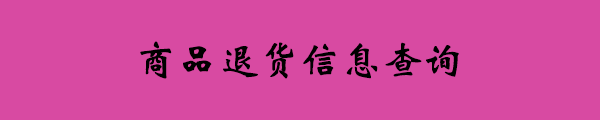
<style>
.page{position:relative;width:600px;height:120px;background:#d84aa2}
.page>*{position:absolute;margin:0}
.t1{font:40px "STXinwei";color:#000000;font-weight:bold}
</style>
<div class="page">
<p class="t1" style="left:140px;top:41px;width:319px;height:38px">商品退货信息查询</p>
</div>
